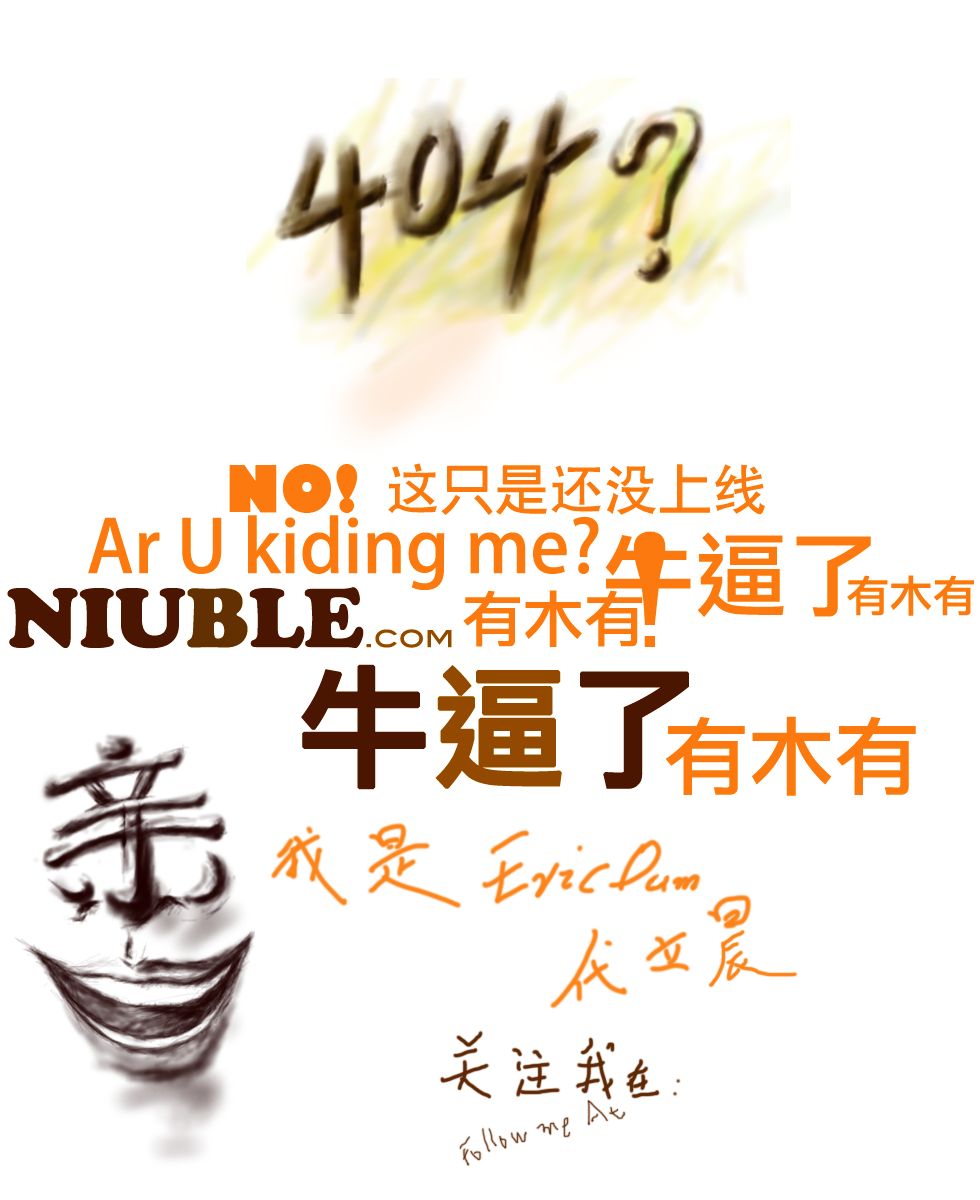
<style>
.page{position:relative;width:980px;height:1200px;background:#ffffff}
.page>*{position:absolute;margin:0}
.t1{font:62.7px "GillSans-UltraBold";color:#fb8319}
.t2{font:54.6px "AdobeFanHeitiStd-Bold";color:#fb8319}
.t3{font:54.6px "AdobeHeitiStd-Regular";color:#fb8319}
.t4{font:72px "AdobeFanHeitiStd-Bold";color:#fb8319}
.t5{font:43.3px "LiHeiPro";color:#fb8319}
.t6{font:27.6px "BlairMdITCTTMedium";color:#985d00}
.t7{font:82.8px "CooperBlackStd";color:#5e2603}
.t8{font:82.8px "CooperBlackStd";color:#724601}
.t9{font:61.1px "LiHeiPro";color:#fb8319}
.t10{font:132px "LiHeiPro";color:#5e2603;font-weight:bold}
.t11{font:132px "LiHeiPro";color:#985d00;font-weight:bold}
.t12{font:85.5px "LiHeiPro";color:#fb8319}
</style>
<div class="page">
<p class="t1" style="left:229px;top:464px;width:129px;height:49px">NO!</p>
<p class="t2" style="left:388px;top:463px;width:377px;height:52px"><span class="t3">这</span>只是<span class="t3">还没</span>上<span class="t3">线</span></p>
<p class="t4" style="left:88px;top:515px;width:511px;height:75px">Ar U kiding me?</p>
<p class="t5" style="left:847px;top:575px;width:127px;height:41px">有木有</p>
<p class="t6" style="left:7px;top:587px;width:445px;height:62px"><span class="t7">NIU</span><span class="t8">B</span><span class="t7">LE</span>.com</p>
<p class="t9" style="left:463px;top:590px;width:180px;height:57px">有木有</p>
<p class="t10" style="left:301px;top:664px;width:388px;height:126px">牛<span class="t11">逼</span>了</p>
<p class="t12" style="left:665px;top:716px;width:251px;height:80px">有木有</p>
</div>
